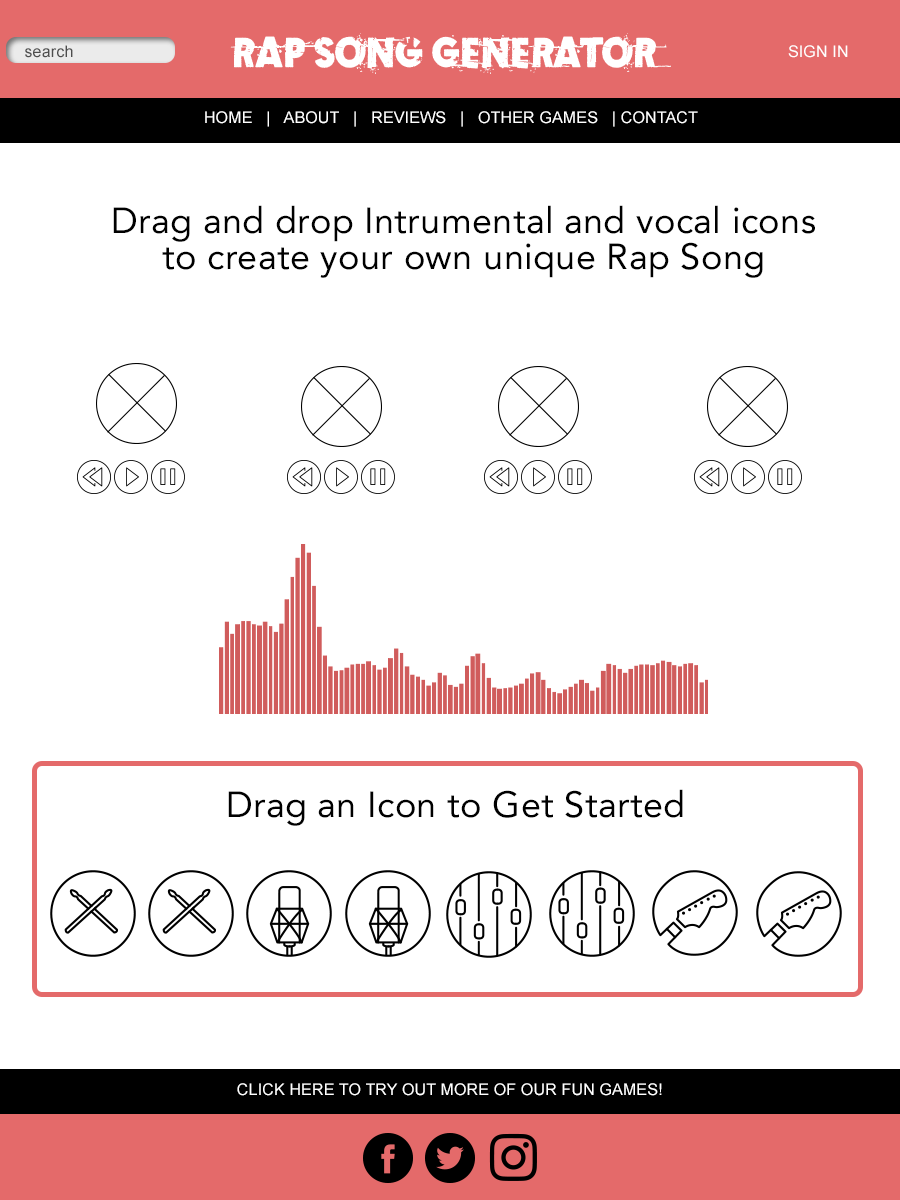
<style>
.page{position:relative;width:900px;height:1200px;background:#ffffff}
.page>*{position:absolute;margin:0}
.t1{font:16px "ArialMT";letter-spacing:0.01em;color:#4d4d4d}
.t2{font:16px "ArialMT";letter-spacing:0.01em;color:#ffffff}
.t3{font:36px/36px "Avenir-Roman";letter-spacing:0.01em;color:#000000}
</style>
<div class="page">
<p class="t1" style="left:25px;top:45px;width:48px;height:13px">search</p>
<p class="t2" style="left:788px;top:45px;width:60px;height:13px">SIGN IN</p>
<p class="t2" style="left:205px;top:111px;width:493px;height:16px">HOME   |   ABOUT   |   REVIEWS   |   OTHER GAMES   | CONTACT</p>
<p class="t3" style="left:113px;top:205px;width:702px;height:73px;text-align:center">Drag and drop Intrumental and vocal icons to create your own unique Rap Song</p>
<p class="t3" style="left:228px;top:789px;width:455px;height:37px;text-align:center">Drag an Icon to Get Started<br>t Started</p>
<p class="t2" style="left:237px;top:1083px;width:425px;height:13px">CLICK HERE TO TRY OUT MORE OF OUR FUN GAMES!</p>
</div>
